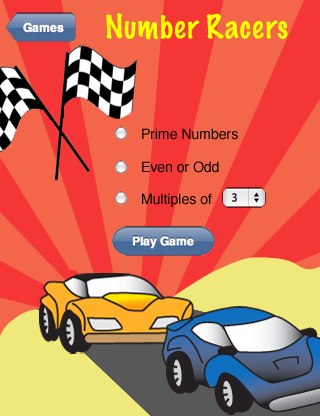
<style>
.page{position:relative;width:320px;height:416px;background:#f36649}
.page>*{position:absolute;margin:0}
.t1{font:29.9px "MarkerFelt-Thin";color:#fcff00}
.t2{font:14px "Helvetica";color:#000000}
</style>
<div class="page">
<p class="t1" style="left:106px;top:13px;width:182px;height:27px">Number Racers</p>
<p class="t2" style="left:142px;top:128px;width:96px;height:12px">Prime Numbers</p>
<p class="t2" style="left:142px;top:161px;width:77px;height:12px">Even or Odd</p>
<p class="t2" style="left:142px;top:193px;width:70px;height:14px">Multiples of</p>
</div>
